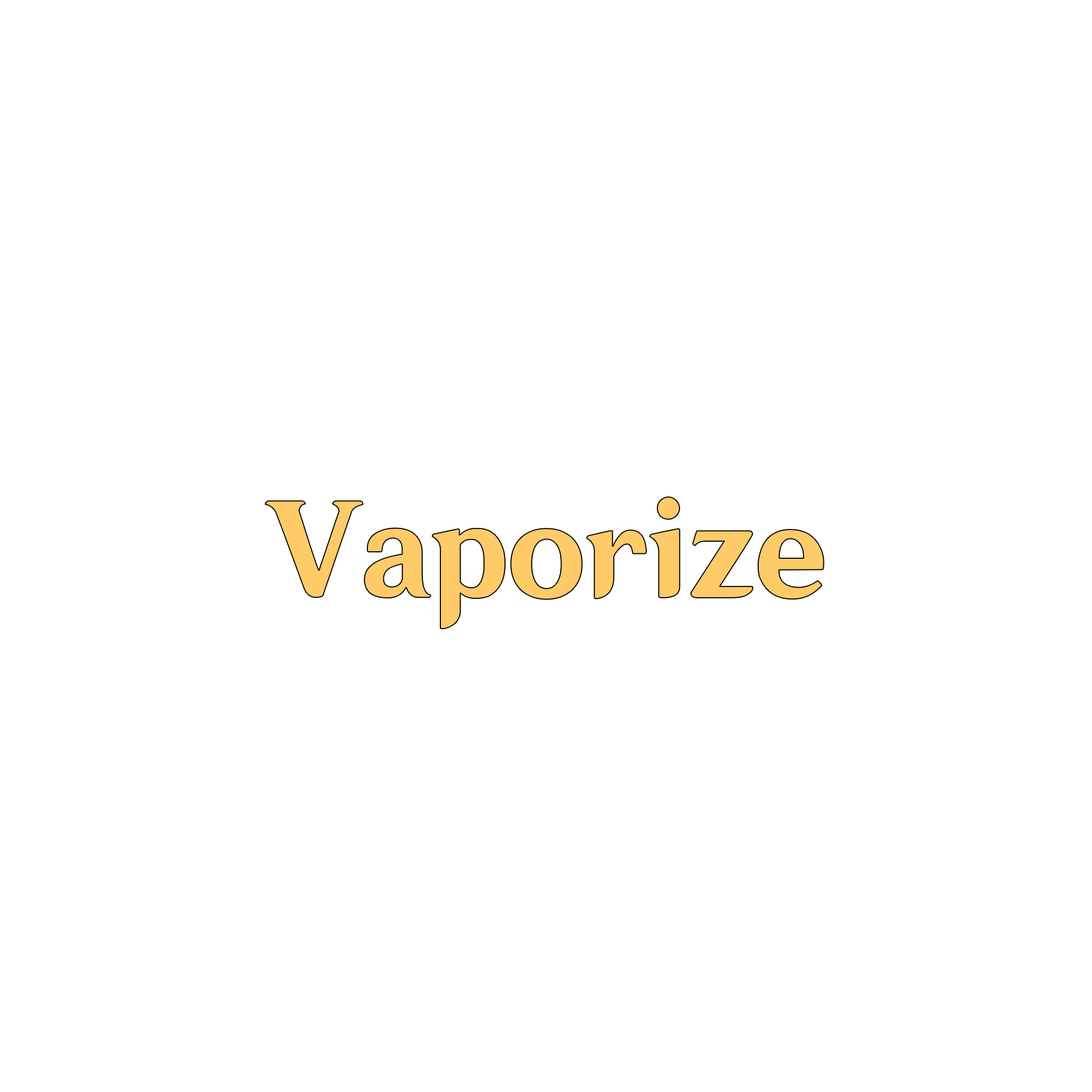
<style>
.page{position:relative;width:1092px;height:1092px;background:#ffffff}
.page>*{position:absolute;margin:0}
.t1{font:122.2px "Default_SC-85W";color:#ffca68}
</style>
<div class="page">
<p class="t1" style="left:265px;top:497px;width:559px;height:132px">Vaporize</p>
</div>
